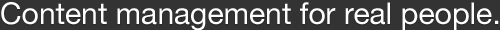
<style>
.page{position:relative;width:500px;height:30px;background:#333333}
.page>*{position:absolute;margin:0}
.t1{font:30px "HelveticaNeue";color:#ffffff}
</style>
<div class="page">
<p class="t1" style="left:1px;top:2px;width:498px;height:29px">Content management for real people.</p>
</div>
